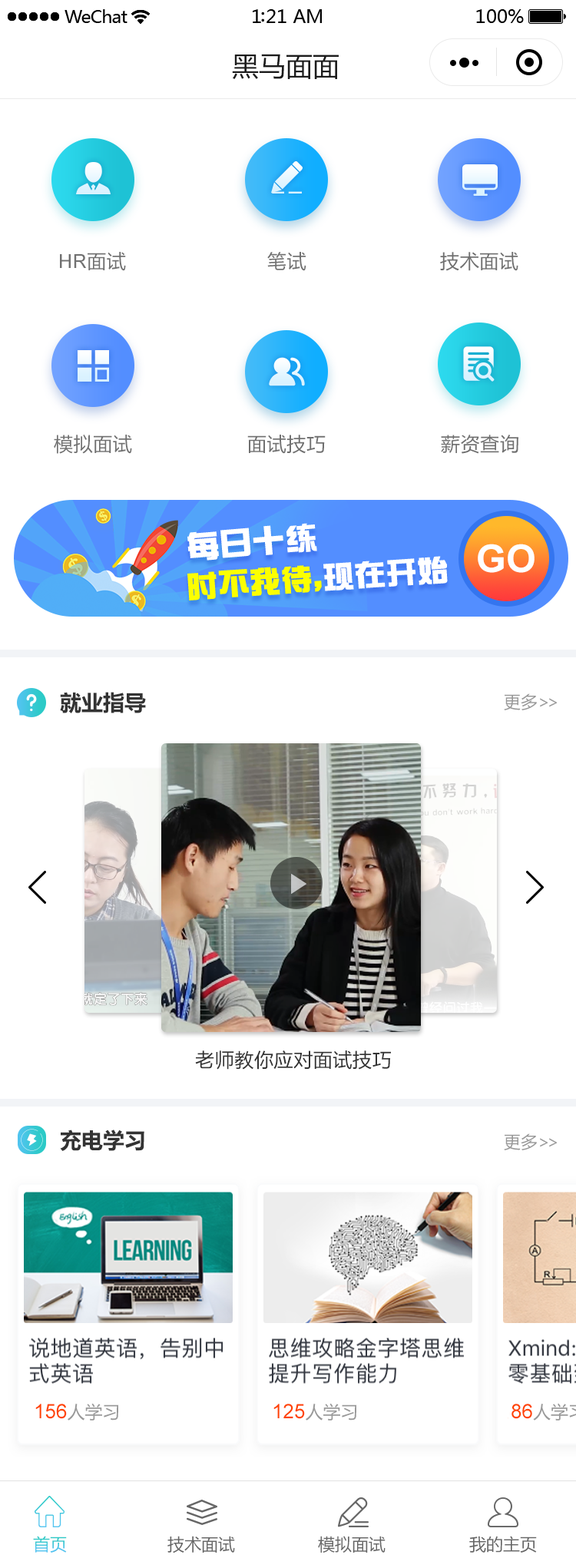
<style>
.page{position:relative;width:576px;height:1568px;background:#ffffff}
.page>*{position:absolute;margin:0}
.t1{font:26.9px "MicrosoftYaHei";color:#1c1c1c}
.t2{font:19.2px "ArialMT";letter-spacing:0.025em;color:#707070}
.t3{font:19.2px "MicrosoftYaHei";letter-spacing:0.025em;color:#707070}
.t4{font:31.1px "AFZonYiCS";letter-spacing:0.025em;color:#ffffff;font-weight:bold}
.t5{font:38.4px "Arial-BoldMT";color:#fefefe}
.t6{font:29.9px "AFZonYiCS";letter-spacing:0.025em;color:#fcff00;font-weight:bold}
.t7{font:29.9px "AFZonYiCS";letter-spacing:0.025em;color:#ffffff;font-weight:bold}
.t8{font:21.5px "MicrosoftYaHei-Bold";color:#333333}
.t9{font:16.9px "MicrosoftYaHei";color:#999999}
.t10{font:16.9px "MicrosoftYaHei";letter-spacing:-0.2em;color:#999999}
.t11{font:19.2px "MicrosoftYaHei";letter-spacing:0.025em;color:#333333}
.t12{font:20px "ArialMT";color:#ff4400}
.t13{font:17.7px "MicrosoftYaHei";color:#999999}
.t14{font:16.9px "MicrosoftYaHei";color:#3dc7d9}
.t15{font:16.9px "MicrosoftYaHei";color:#666666}
</style>
<div class="page">
<p class="t1" style="left:232px;top:54px;width:107px;height:25px">黑马面面</p>
<p class="t2" style="left:60px;top:252px;width:66px;height:19px">HR<span class="t3">面试</span></p>
<p class="t3" style="left:267px;top:252px;width:39px;height:19px">笔试</p>
<p class="t3" style="left:440px;top:252px;width:78px;height:19px">技术面试</p>
<p class="t3" style="left:54px;top:435px;width:78px;height:19px">模拟面试</p>
<p class="t3" style="left:247px;top:435px;width:79px;height:19px">面试技巧</p>
<p class="t3" style="left:441px;top:435px;width:77px;height:19px">薪资查询</p>
<p class="t4" style="left:187px;top:523px;width:130px;height:38px;rotate:-5deg">每日十练</p>
<p class="t5" style="left:478px;top:544px;width:56px;height:29px">GO</p>
<p class="t6" style="left:187px;top:556px;width:261px;height:44px;rotate:-4deg">时不我待,<span class="t7">现在开始</span></p>
<p class="t8" style="left:60px;top:692px;width:86px;height:21px">就业指导</p>
<p class="t9" style="left:504px;top:693px;width:53px;height:17px">更多<span class="t10">&gt;&gt;</span></p>
<p class="t11" style="left:195px;top:1050px;width:196px;height:20px">老师教你应对面试技巧</p>
<p class="t8" style="left:60px;top:1130px;width:84px;height:21px">充电学习</p>
<p class="t9" style="left:504px;top:1133px;width:53px;height:17px">更多<span class="t10">&gt;&gt;</span></p>
<p class="t12" style="left:35px;top:1403px;width:84px;height:18px">156<span class="t13">人学习</span></p>
<p class="t12" style="left:273px;top:1403px;width:84px;height:18px">125<span class="t13">人学习</span></p>
<p class="t14" style="left:33px;top:1536px;width:34px;height:17px">首页</p>
<p class="t15" style="left:167px;top:1536px;width:68px;height:17px">技术面试</p>
<p class="t15" style="left:318px;top:1536px;width:67px;height:17px">模拟面试</p>
<p class="t15" style="left:469px;top:1536px;width:68px;height:17px">我的主页</p>
</div>
